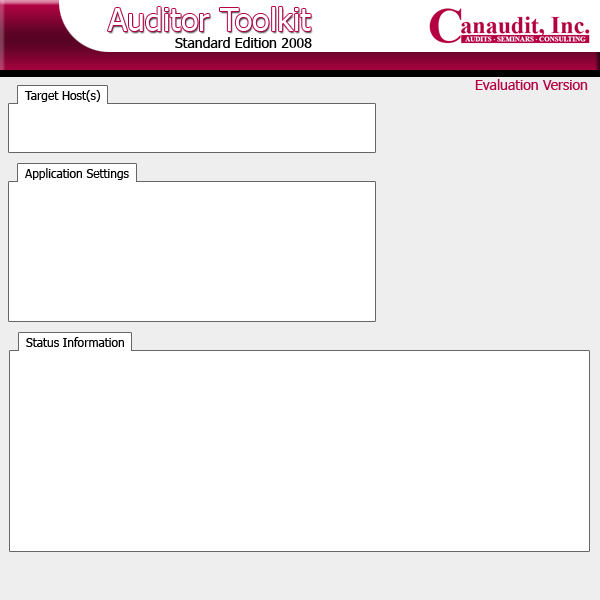
<style>
.page{position:relative;width:600px;height:600px;background:#ffffff}
.page>*{position:absolute;margin:0}
.t1{font:32px "Tahoma";color:#ffffff}
.t2{font:14px "Tahoma";color:#000000}
.t3{font:14px "Tahoma";color:#b50043}
.t4{font:12px "Tahoma";color:#000000}
</style>
<div class="page">
<p class="t1" style="left:108px;top:7px;width:203px;height:24px">Auditor Toolkit</p>
<p class="t2" style="left:175px;top:37px;width:137px;height:11px">Standard Edition 2008</p>
<p class="t3" style="left:475px;top:79px;width:113px;height:11px">Evaluation Version</p>
<p class="t4" style="left:24px;top:90px;width:77px;height:12px">Target Host(s)</p>
<p class="t4" style="left:25px;top:168px;width:104px;height:12px">Application Settings</p>
<p class="t4" style="left:26px;top:337px;width:98px;height:10px">Status Information</p>
</div>
